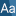
<style>
.page{position:relative;width:16px;height:16px;background:#19527b}
.page>*{position:absolute;margin:0}
.t1{font:13px "Roboto-Light";color:#ffffff}
</style>
<div class="page">
<p class="t1" style="left:0px;top:3px;width:15px;height:10px">Aa</p>
</div>
